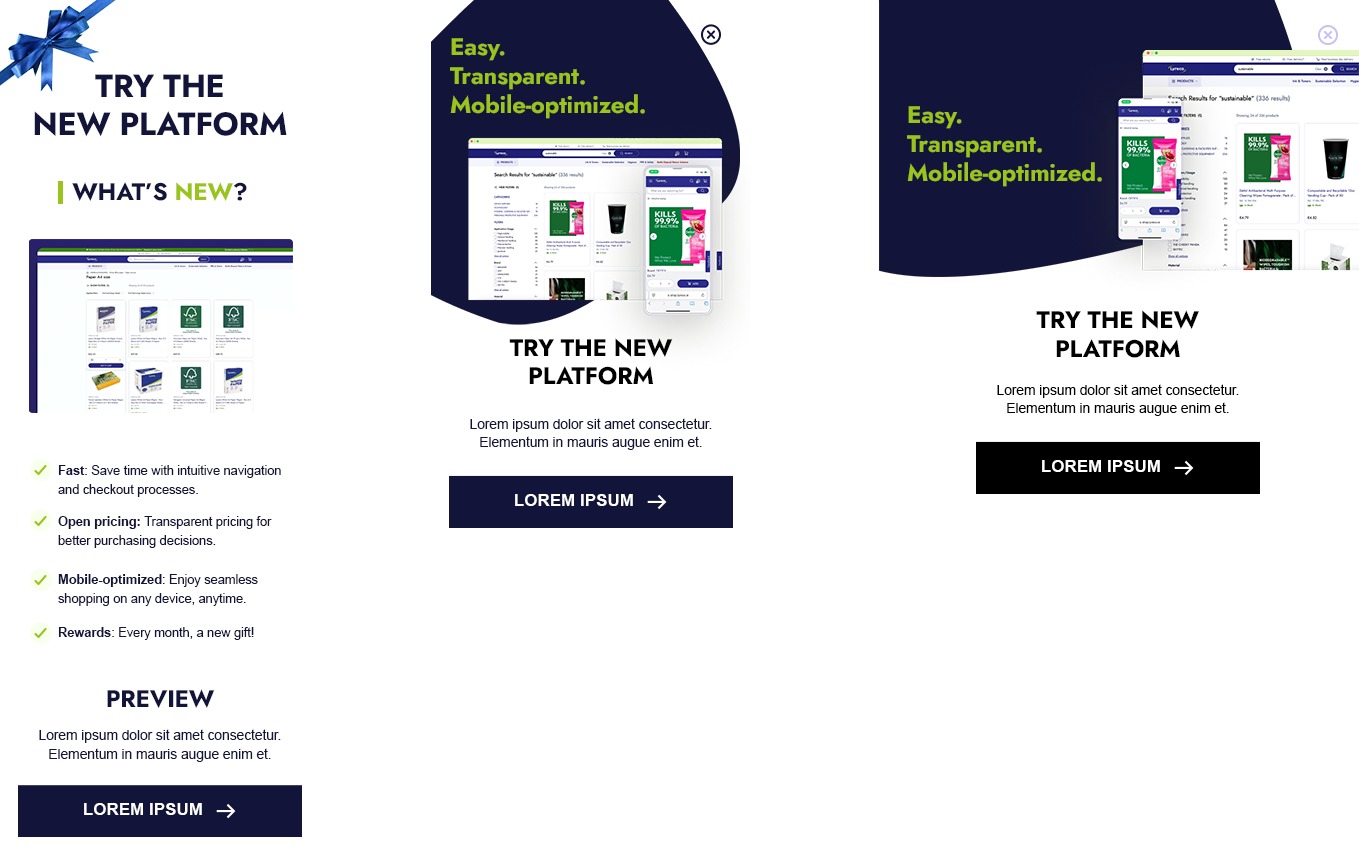
<style>
.page{position:relative;width:1359px;height:861px;background:#ffffff}
.page>*{position:absolute;margin:0}
.t1{font:24px "Jost-Bold";letter-spacing:-0.01em;color:#9ac31c}
.t2{font:32px "Jost-Bold";letter-spacing:-0.01em;color:#131439;text-transform:uppercase}
.t3{font:24px "Jost-Bold";letter-spacing:-0.01em;color:#131439;text-transform:uppercase}
.t4{font:24px "Jost-Bold";letter-spacing:-0.01em;color:#9ac31c;text-transform:uppercase}
.t5{font:24px "Jost-Bold";letter-spacing:-0.01em;color:#000000;text-transform:uppercase}
.t6{font:14px/18px "ArialMT";letter-spacing:-0.01em;color:#000000}
.t7{font:14px/18px "ArialMT";letter-spacing:-0.01em;color:#131439}
.t8{font:17.1px "Arial-BoldMT";color:#ffffff;text-transform:uppercase}
.t9{font:13px/19px "ArialMT";letter-spacing:-0.01em;color:#131439}
.t10{font:13px/19px "Arial-BoldMT";letter-spacing:-0.01em;color:#131439}
.t11{font:13px "ArialMT";letter-spacing:-0.01em;color:#131439}
.t12{font:13px "Arial-BoldMT";letter-spacing:-0.01em;color:#131439}
.t13{font:17px "Arial-BoldMT";color:#ffffff;text-transform:uppercase}
</style>
<div class="page">
<p class="t1" style="left:450px;top:38px;width:195px;height:81px">Easy.<br>Transparent.<br>Mobile-optimized.</p>
<p class="t2" style="left:34px;top:74px;width:253px;height:63px;text-align:center">Try The <br>new platform</p>
<p class="t1" style="left:907px;top:106px;width:195px;height:81px">Easy.<br>Transparent.<br>Mobile-optimized.</p>
<p class="t3" style="left:72px;top:182px;width:175px;height:19px">WHAT’S <span class="t4">NEW</span>?</p>
<p class="t5" style="left:1036px;top:310px;width:163px;height:48px;text-align:center">Try the new<br>platform</p>
<p class="t5" style="left:509px;top:338px;width:164px;height:47px;text-align:center">Try the new platform</p>
<p class="t6" style="left:997px;top:384px;width:242px;height:32px;text-align:center">Lorem ipsum dolor sit amet consectetur. Elementum in mauris augue enim et.</p>
<p class="t7" style="left:470px;top:418px;width:242px;height:32px;text-align:center">Lorem ipsum dolor sit amet consectetur. Elementum in mauris augue enim et.</p>
<p class="t8" style="left:1042px;top:460px;width:118px;height:12px">Lorem ipsum</p>
<p class="t9" style="left:58px;top:465px;width:223px;height:32px"><span class="t10">Fast</span>: Save time with intuitive navigation and checkout processes.</p>
<p class="t8" style="left:515px;top:494px;width:118px;height:12px">Lorem ipsum</p>
<p class="t9" style="left:58px;top:516px;width:214px;height:32px"><span class="t10">Open pricing: </span>Transparent pricing for better purchasing decisions.</p>
<p class="t9" style="left:58px;top:574px;width:200px;height:32px"><span class="t10">Mobile-optimized</span>: Enjoy seamless shopping on any device, anytime.</p>
<p class="t11" style="left:58px;top:627px;width:196px;height:13px"><span class="t12">Rewards</span>: Every month, a new gift!</p>
<p class="t3" style="left:107px;top:689px;width:108px;height:19px">PREVIEW</p>
<p class="t7" style="left:39px;top:729px;width:242px;height:33px;text-align:center">Lorem ipsum dolor sit amet consectetur. Elementum in mauris augue enim et.</p>
<p class="t13" style="left:84px;top:803px;width:118px;height:12px">Lorem ipsum</p>
</div>
